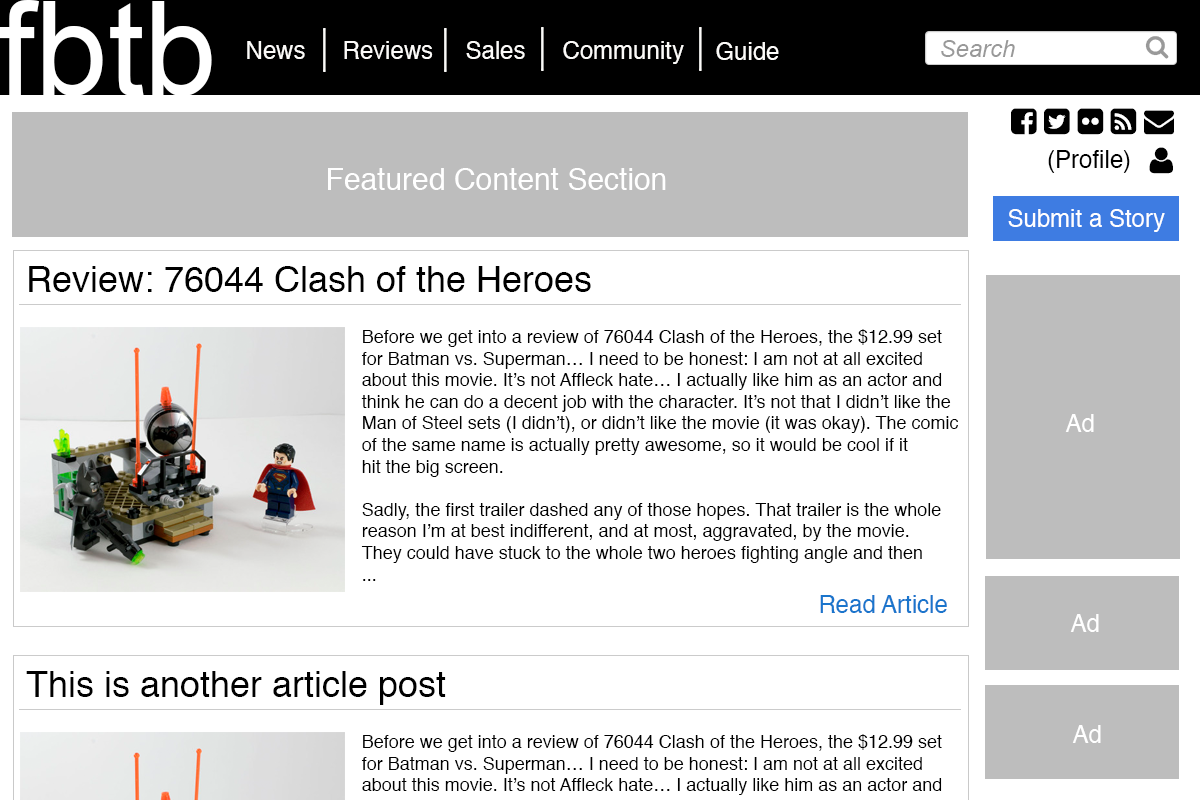
<style>
.page{position:relative;width:1200px;height:800px;background:#ffffff}
.page>*{position:absolute;margin:0}
.t1{font:131px "ArialMT";color:#ffffff}
.t2{font:24px "Helvetica";color:#fcfbf9}
.t3{font:24px "Arial-ItalicMT";color:#999999}
.t4{font:24px "Helvetica";color:#000000}
.t5{font:30px "Helvetica";color:#ffffff}
.t6{font:24px "Helvetica";color:#ffffff}
.t7{font:36px "Helvetica";color:#000000}
.t8{font:18px "Helvetica";color:#000000}
.t9{font:24px "Helvetica";color:#1a75cc}
</style>
<div class="page">
<p class="t1" style="left:0px;top:0px;width:212px;height:96px">fbtb</p>
<p class="t2" style="left:247px;top:41px;width:58px;height:18px">News</p>
<p class="t2" style="left:344px;top:41px;width:89px;height:18px">Reviews</p>
<p class="t2" style="left:466px;top:41px;width:59px;height:18px">Sales</p>
<p class="t2" style="left:563px;top:41px;width:121px;height:23px">Community</p>
<p class="t3" style="left:941px;top:40px;width:74px;height:17px">Search</p>
<p class="t2" style="left:716px;top:42px;width:63px;height:18px">Guide</p>
<p class="t4" style="left:1048px;top:150px;width:82px;height:23px">(Profile)</p>
<p class="t5" style="left:328px;top:168px;width:338px;height:22px">Featured Content Section</p>
<p class="t6" style="left:1008px;top:209px;width:157px;height:23px">Submit a Story</p>
<p class="t7" style="left:29px;top:266px;width:562px;height:26px">Review: 76044 Clash of the Heroes</p>
<p class="t8" style="left:361px;top:329px;width:597px;height:252px">Before we get into a review of 76044 Clash of the Heroes, the $12.99 set <br>for Batman vs. Superman… I need to be honest: I am not at all excited <br>about this movie. It’s not Affleck hate… I actually like him as an actor and <br>think he can do a decent job with the character. It’s not that I didn’t like the <br>Man of Steel sets (I didn’t), or didn’t like the movie (it was okay). The comic<br>of the same name is actually pretty awesome, so it would be cool if it <br>hit the big screen.<br><br>Sadly, the first trailer dashed any of those hopes. That trailer is the whole <br>reason I’m at best indifferent, and at most, aggravated, by the movie. <br>They could have stuck to the whole two heroes fighting angle and then <br>...</p>
<p class="t6" style="left:1065px;top:414px;width:29px;height:18px">Ad</p>
<p class="t9" style="left:820px;top:595px;width:127px;height:18px">Read Article</p>
<p class="t6" style="left:1070px;top:614px;width:29px;height:18px">Ad</p>
<p class="t7" style="left:26px;top:671px;width:420px;height:34px">This is another article post</p>
<p class="t6" style="left:1072px;top:725px;width:29px;height:18px">Ad</p>
</div>
